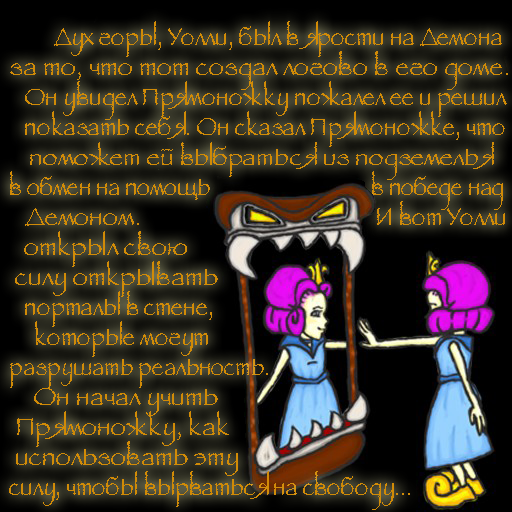
<style>
.page{position:relative;width:512px;height:512px}
.page>*{position:absolute;margin:0}
.t1{font:25px/30px "1Papyrus";color:#d18b07;scale:0.87 1}
.t2{font:25px/30px "Papyrus-Regular";color:#d18b07}
.t3{font:25px/30px "1Papyrus";color:#d18b07;scale:0.9 1}
.t4{font:25px/30px "1Papyrus";color:#d18b07}
.t5{font:25px/30px "1Papyrus";color:#d18b07;scale:0.91 1}
.t6{font:25px/30px "1Papyrus";color:#d18b07;scale:0.86 1}
</style>
<div class="page">
<p class="t1" style="left:9px;top:21px;width:499px;height:489px"><span class="t2">         </span><span class="t3">Дух горы, Уолли, был в ярости на Демона<br></span><span class="t4">за то, что тот создал логово в его доме.<br>   </span><span class="t5">Он увидел Прямоножку пожалел ее и решил<br></span><span class="t3">   показать себя. Он сказал Прямоножке, что<br>    </span><span class="t4">поможет ей выбраться из подземелья<br></span>в обмен на помощь                                в победе над <br>  <span class="t4"> Демоном.                                               </span><span class="t3">И вот Уолли<br>   </span><span class="t4">открыл свою<br> силу открывать <br></span><span class="t3">   порталы в стене,<br>     которые могут<br></span><span class="t6">разрушать реальность.<br></span><span class="t4">    Он начал учить <br> Прямоножку, как <br> использовать эту <br></span><span class="t3">силу, чтобы вырваться на свободу...</span></p>
<p class="t1" style="left:9px;top:21px;width:499px;height:489px"><span class="t2">         </span><span class="t3">Дух горы, Уолли, был в ярости на Демона<br></span><span class="t4">за то, что тот создал логово в его доме.<br>   </span><span class="t5">Он увидел Прямоножку пожалел ее и решил<br></span><span class="t3">   показать себя. Он сказал Прямоножке, что<br>    </span><span class="t4">поможет ей выбраться из подземелья<br></span>в обмен на помощь                                в победе над <br>  <span class="t4"> Демоном.                                               </span><span class="t3">И вот Уолли<br>   </span><span class="t4">открыл свою<br> силу открывать <br></span><span class="t3">   порталы в стене,<br>     которые могут<br></span><span class="t6">разрушать реальность.<br></span><span class="t4">    Он начал учить <br> Прямоножку, как <br> использовать эту <br></span><span class="t3">силу, чтобы вырваться на свободу...</span></p>
</div>
